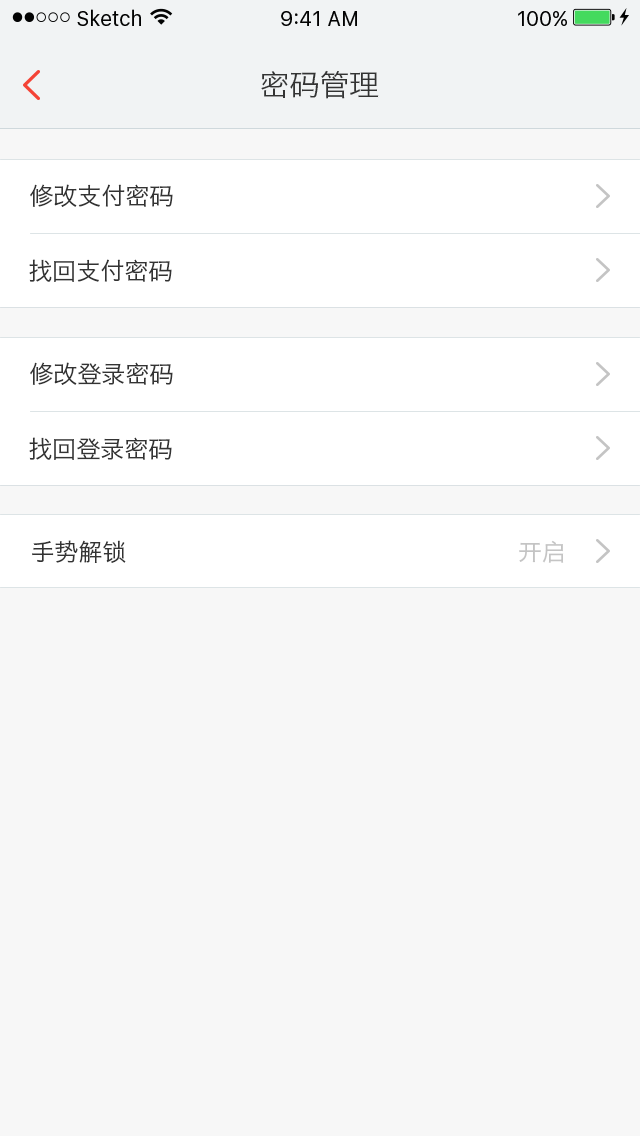
<style>
.page{position:relative;width:640px;height:1136px;background:#f7f7f7}
.page>*{position:absolute;margin:0}
.t1{font:30px "HiraginoSansGB-W3";color:#333333}
.t2{font:24px "HiraginoSansGB-W3";color:#333333}
.t3{font:24px "HiraginoSansGB-W3";color:#c4c4c4}
</style>
<div class="page">
<p class="t1" style="left:261px;top:70px;width:118px;height:29px">密码管理</p>
<p class="t2" style="left:30px;top:184px;width:143px;height:23px">修改支付密码</p>
<p class="t2" style="left:29px;top:259px;width:143px;height:23px">找回支付密码</p>
<p class="t2" style="left:30px;top:362px;width:143px;height:23px">修改登录密码</p>
<p class="t2" style="left:29px;top:437px;width:143px;height:23px">找回登录密码</p>
<p class="t2" style="left:32px;top:540px;width:94px;height:23px">手势解锁</p>
<p class="t3" style="left:519px;top:540px;width:45px;height:23px">开启</p>
</div>
